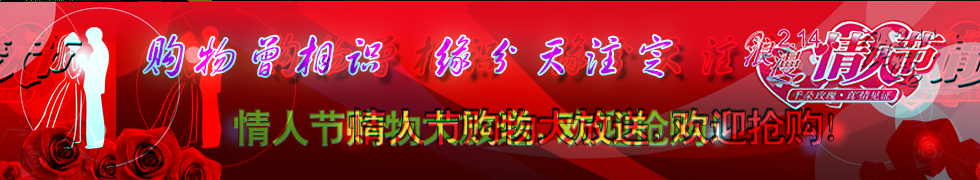
<style>
.page{position:relative;width:980px;height:180px}
.page>*{position:absolute;margin:0}
.t1{font:50px "GJJHCJW--GB1-0";font-style:italic}
.t2{font:37.5px "-G-h-e-i-0-1-h"}
</style>
<div class="page">
<p class="t1" style="left:144px;top:34px;width:527px;height:42px">购物曾相识    缘分天注定</p>
<p class="t2" style="left:233px;top:108px;width:311px;height:37px">情人节购物大放送，</p>
<p class="t2" style="left:556px;top:108px;width:162px;height:37px">欢迎抢购！</p>
</div>
